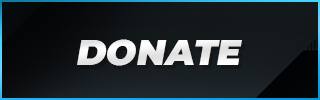
<style>
.page{position:relative;width:320px;height:100px}
.page>*{position:absolute;margin:0}
.t1{font:36px "Montserrat-Black";color:#ffffff;text-transform:uppercase;font-style:italic}
</style>
<div class="page">
<p class="t1" style="left:77px;top:39px;width:165px;height:27px">donate</p>
</div>
